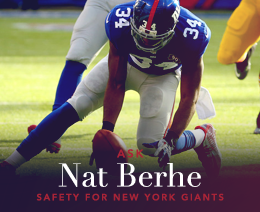
<style>
.page{position:relative;width:260px;height:212px}
.page>*{position:absolute;margin:0}
.t1{font:9px/14px "Avenir-Heavy";letter-spacing:0.2em;color:#a92437;text-transform:uppercase}
.t2{font:11px/18px "Avenir-Heavy";letter-spacing:0.2em;color:#a92437;text-transform:uppercase}
.t3{font:32px/29px "Didot";color:#ffffff}
</style>
<div class="page">
<p class="t1" style="left:36px;top:149px;width:188px;height:52px;text-align:center"><span class="t2">ASK<br></span><span class="t3">Nat Berhe<br></span>SAfety for new york giants</p>
</div>
